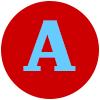
<style>
.page{position:relative;width:100px;height:100px;background:#cc0000}
.page>*{position:absolute;margin:0}
.t1{font:67.7px "UTM-Bienvenue";color:#66ccff;font-weight:bold}
</style>
<div class="page">
<p class="t1" style="left:23px;top:20px;width:53px;height:51px">A</p>
</div>
